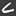
<style>
.page{position:relative;width:16px;height:16px;background:#3e3e3e}
.page>*{position:absolute;margin:0}
.t1{font:16px "Brook23";letter-spacing:-0.04em;color:#ffffff}
</style>
<div class="page">
<p class="t1" style="left:1px;top:2px;width:13px;height:12px">C</p>
<p class="t1" style="left:1px;top:2px;width:13px;height:12px">C</p>
</div>
